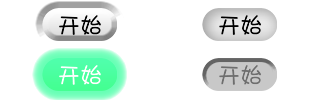
<style>
.page{position:relative;width:320px;height:100px;background:#ffffff}
.page>*{position:absolute;margin:0}
.t1{font:22.3px "DFShaoNvW5";color:#000000}
.t2{font:22.3px "DFShaoNvW5";color:#ffffff}
.t3{font:22.3px "DFShaoNvW5";color:#6e6e6e}
</style>
<div class="page">
<p class="t1" style="left:59px;top:15px;width:42px;height:20px">开始</p>
<p class="t1" style="left:219px;top:15px;width:42px;height:20px">开始</p>
<p class="t2" style="left:59px;top:65px;width:42px;height:20px">开始</p>
<p class="t3" style="left:219px;top:65px;width:42px;height:20px">开始</p>
</div>
